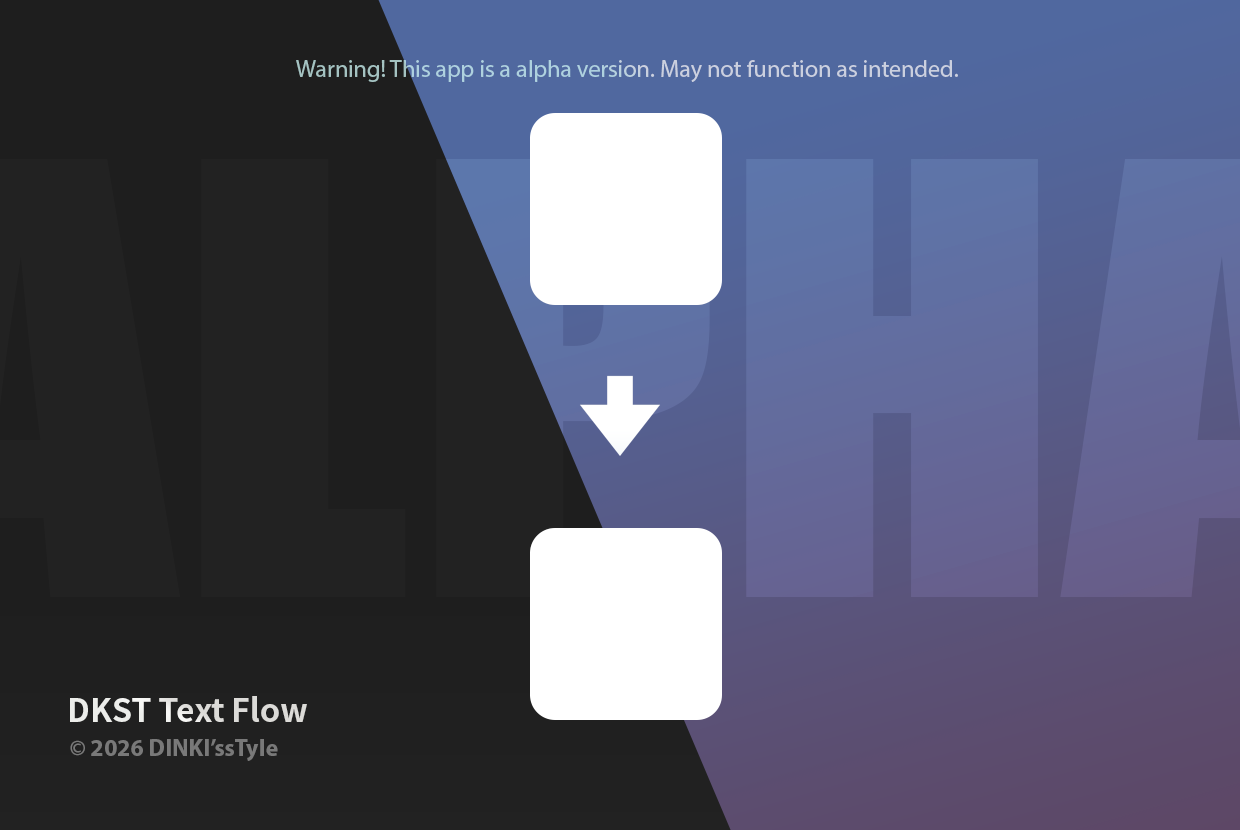
<style>
.page{position:relative;width:1240px;height:830px}
.page>*{position:absolute;margin:0}
.t1{font:24px "MyriadPro-Regular"}
.t2{font:32.1px "NotoSansCJKkr-Bold";color:#e7e6e3}
.t3{font:24px "MyriadPro-Bold";color:#797979}
</style>
<div class="page">
<p class="t1" style="left:296px;top:60px;width:662px;height:22px">Warning! This app is a alpha version. May not function as intended.</p>
<p class="t2" style="left:70px;top:696px;width:237px;height:26px">DKST Text Flow</p>
<p class="t3" style="left:70px;top:739px;width:208px;height:22px">© 2026 DINKI’ssTyle</p>
</div>
